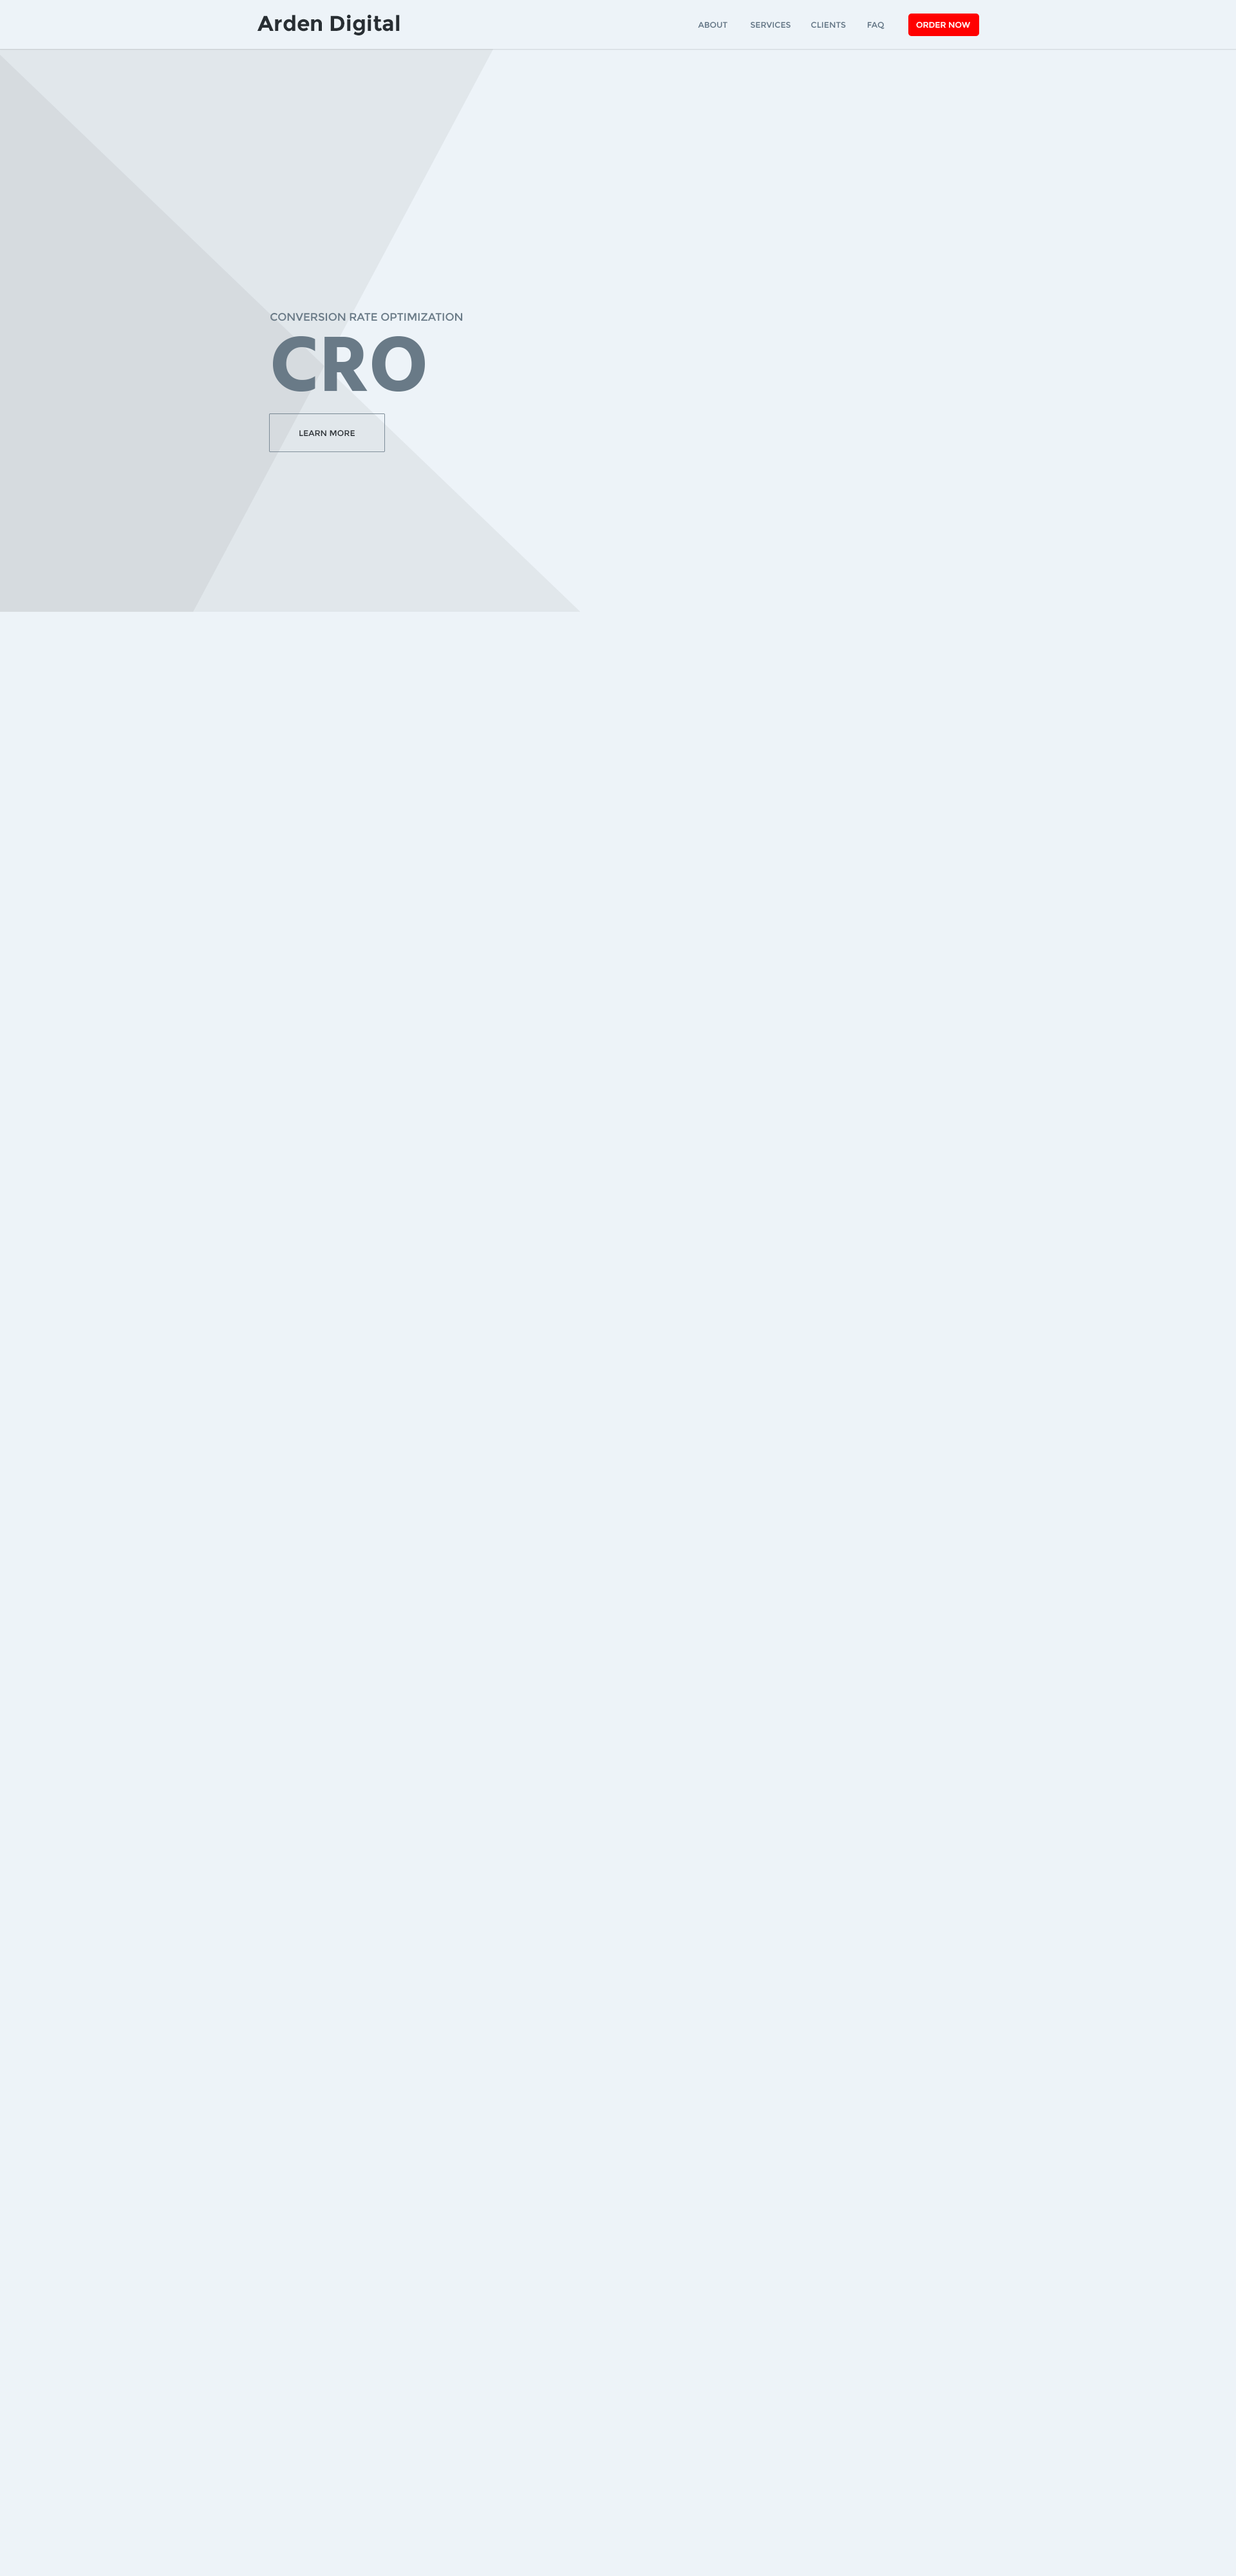
<style>
.page{position:relative;width:1236px;height:2576px;background:#edf3f8}
.page>*{position:absolute;margin:0}
.t1{font:21.5px "Montserrat-Bold";color:#282e33}
.t2{font:8.1px "Montserrat-Regular";color:#5e7283;text-transform:uppercase}
.t3{font:8.1px "Montserrat-Regular";color:#ffffff;text-transform:uppercase}
.t4{font:10.7px "Montserrat-Regular";color:#697a87;text-transform:uppercase}
.t5{font:80.5px "Hind-Bold";color:#697a87;text-transform:uppercase}
.t6{font:8.1px "Montserrat-Regular";color:#282e33;text-transform:uppercase}
</style>
<div class="page">
<p class="t1" style="left:257px;top:14px;width:143px;height:21px">Arden Digital</p>
<p class="t2" style="left:698px;top:21px;width:30px;height:7px">About</p>
<p class="t2" style="left:751px;top:21px;width:40px;height:7px">Services</p>
<p class="t2" style="left:811px;top:21px;width:35px;height:7px">Clients</p>
<p class="t2" style="left:867px;top:21px;width:18px;height:8px">Faq</p>
<p class="t3" style="left:916px;top:21px;width:55px;height:7px">Order now</p>
<p class="t4" style="left:270px;top:312px;width:193px;height:80px">Conversion Rate Optimization<br><span class="t5">CRO</span></p>
<p class="t6" style="left:299px;top:430px;width:56px;height:7px">Learn More</p>
</div>
